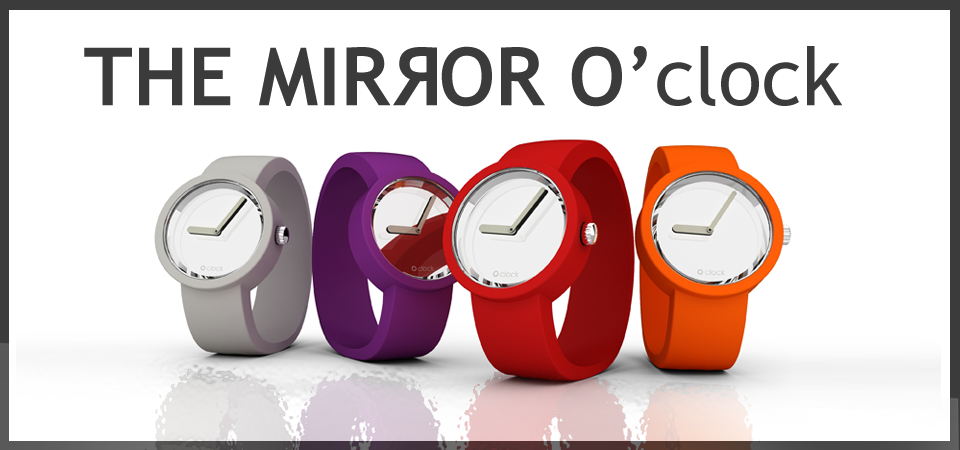
<style>
.page{position:relative;width:960px;height:450px;background:#ffffff}
.page>*{position:absolute;margin:0}
.t1{font:80.6px "TrebuchetMS-Bold";color:#3b3b3b}
.t2{font:80.6px "TrebuchetMS";color:#3b3b3b}
</style>
<div class="page">
<p class="t1" style="left:84px;top:46px;width:759px;height:61px">THE MIR  OR O’<span class="t2">clock</span></p>
<p class="t1" style="left:393px;top:47px;width:44px;height:59px;rotate:180deg">R</p>
</div>
